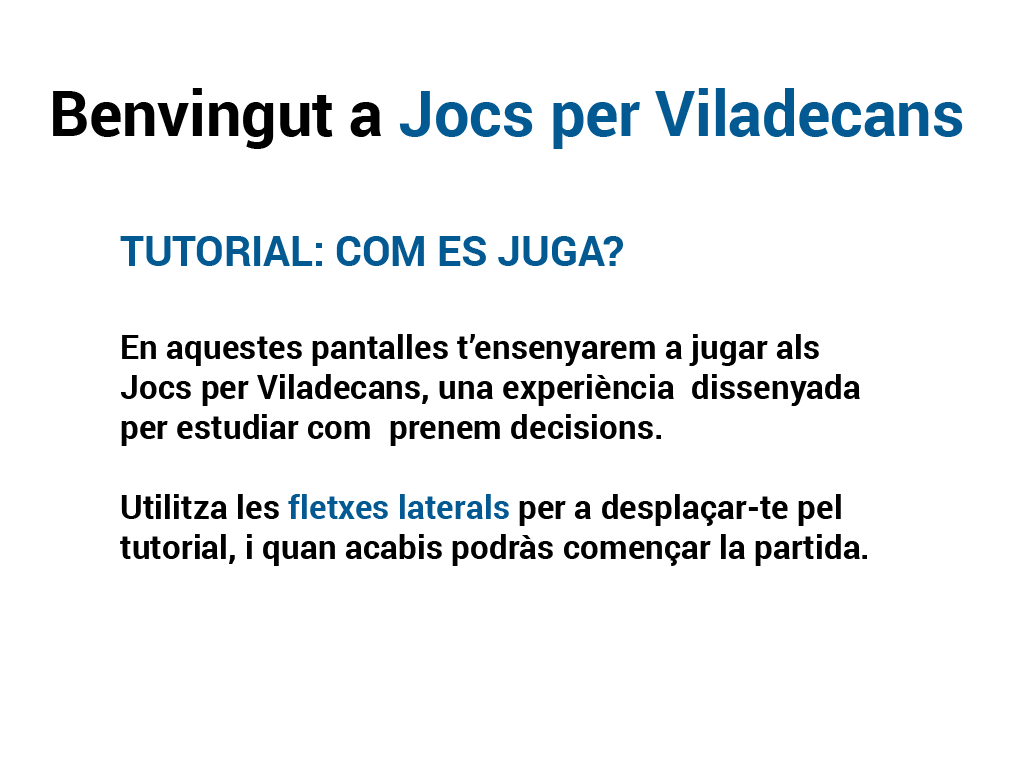
<style>
.page{position:relative;width:1024px;height:768px;background:#ffffff}
.page>*{position:absolute;margin:0}
.t1{font:62.5px "Roboto-Bold";color:#035992}
.t2{font:62.5px "Roboto-Bold";color:#000000}
.t3{font:41.7px "Roboto-Bold";color:#035992}
.t4{font:33.3px "Roboto-Bold";color:#000000}
.t5{font:33.3px "Roboto-Bold";color:#035992}
</style>
<div class="page">
<p class="t1" style="left:53px;top:88px;width:910px;height:61px"><span class="t2">Benvingut a </span>Jocs per Viladecans</p>
<p class="t3" style="left:120px;top:236px;width:503px;height:30px">TUTORIAL: COM ES JUGA?</p>
<p class="t4" style="left:120px;top:334px;width:747px;height:232px">En aquestes pantalles t’ensenyarem a jugar als <br>Jocs per Viladecans, una experiència  dissenyada <br>per estudiar com  prenem decisions. <br><br>Utilitza les <span class="t5">fletxes laterals</span> per a desplaçar-te pel <br>tutorial, i quan acabis podràs començar la partida.</p>
</div>
